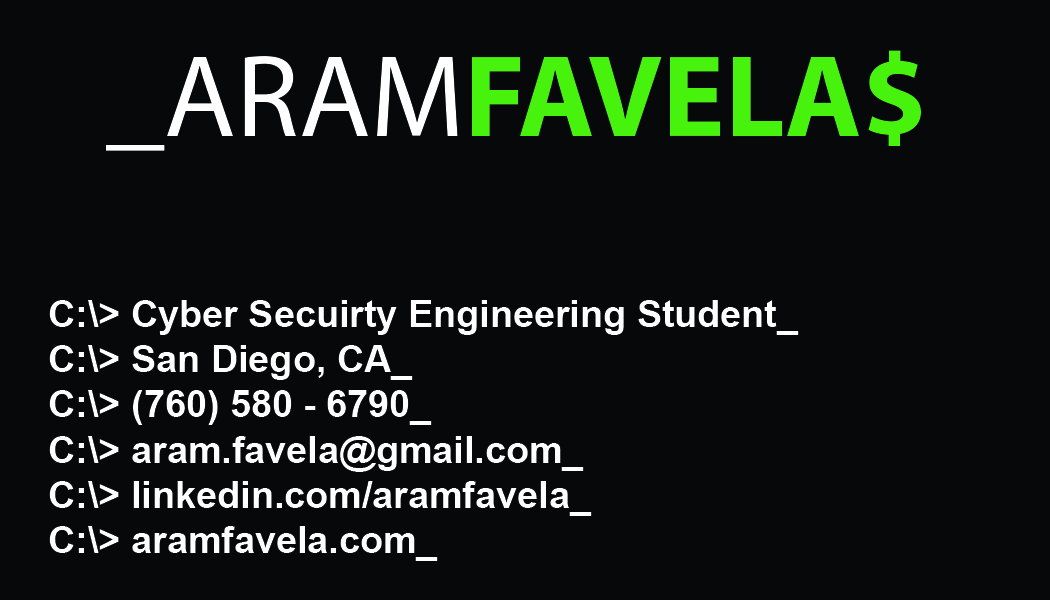
<style>
.page{position:relative;width:1050px;height:600px;background:#070809}
.page>*{position:absolute;margin:0}
.t1{font:116.9px "MyriadPro-Bold";color:#47f20d}
.t2{font:116.9px "MyriadPro-Regular";color:#ffffff}
.t3{font:37.8px "Arial-BoldMT";color:#ffffff}
</style>
<div class="page">
<p class="t1" style="left:106px;top:50px;width:815px;height:101px"><span class="t2">_ARAM</span>FAVELA$</p>
<p class="t3" style="left:49px;top:300px;width:750px;height:261px">C:\&gt; Cyber Secuirty Engineering Student_  <br>C:\&gt; San Diego, CA_<br>C:\&gt; (760) 580 - 6790_<br>C:\&gt; aram.favela@gmail.com_<br>C:\&gt; linkedin.com/aramfavela_<br>C:\&gt; aramfavela.com_</p>
</div>
